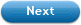
<style>
.page{position:relative;width:81px;height:25px}
.page>*{position:absolute;margin:0}
.t1{font:12px "TrebuchetMS-Bold";letter-spacing:0.05em;color:#ffffff}
</style>
<div class="page">
<p class="t1" style="left:27px;top:6px;width:28px;height:9px">Next</p>
</div>
